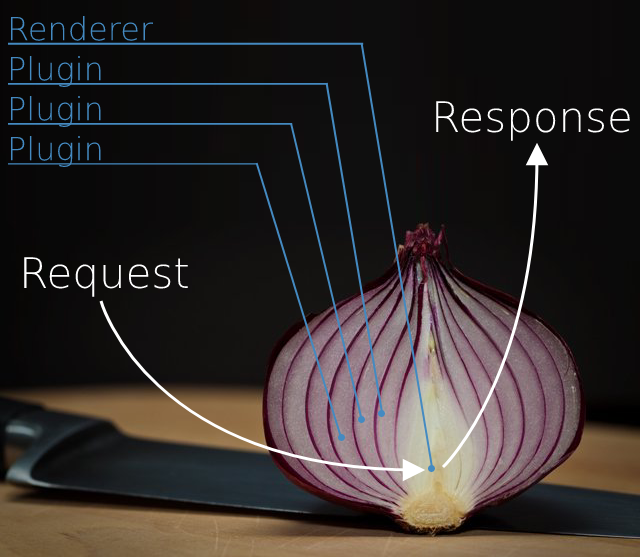
<style>
.page{position:relative;width:640px;height:557px}
.page>*{position:absolute;margin:0}
.t1{font:32px "DejaVuSans-ExtraLight";color:#448ac1}
.t2{font:42px "DejaVuSans-ExtraLight";color:#ffffff}
</style>
<div class="page">
<p class="t1" style="left:10px;top:16px;width:144px;height:25px">Renderer</p>
<p class="t1" style="left:10px;top:56px;width:91px;height:31px">Plugin</p>
<p class="t1" style="left:10px;top:96px;width:91px;height:31px">Plugin</p>
<p class="t2" style="left:436px;top:101px;width:194px;height:40px">Response</p>
<p class="t1" style="left:10px;top:136px;width:91px;height:31px">Plugin</p>
<p class="t2" style="left:24px;top:257px;width:164px;height:40px">Request</p>
</div>
